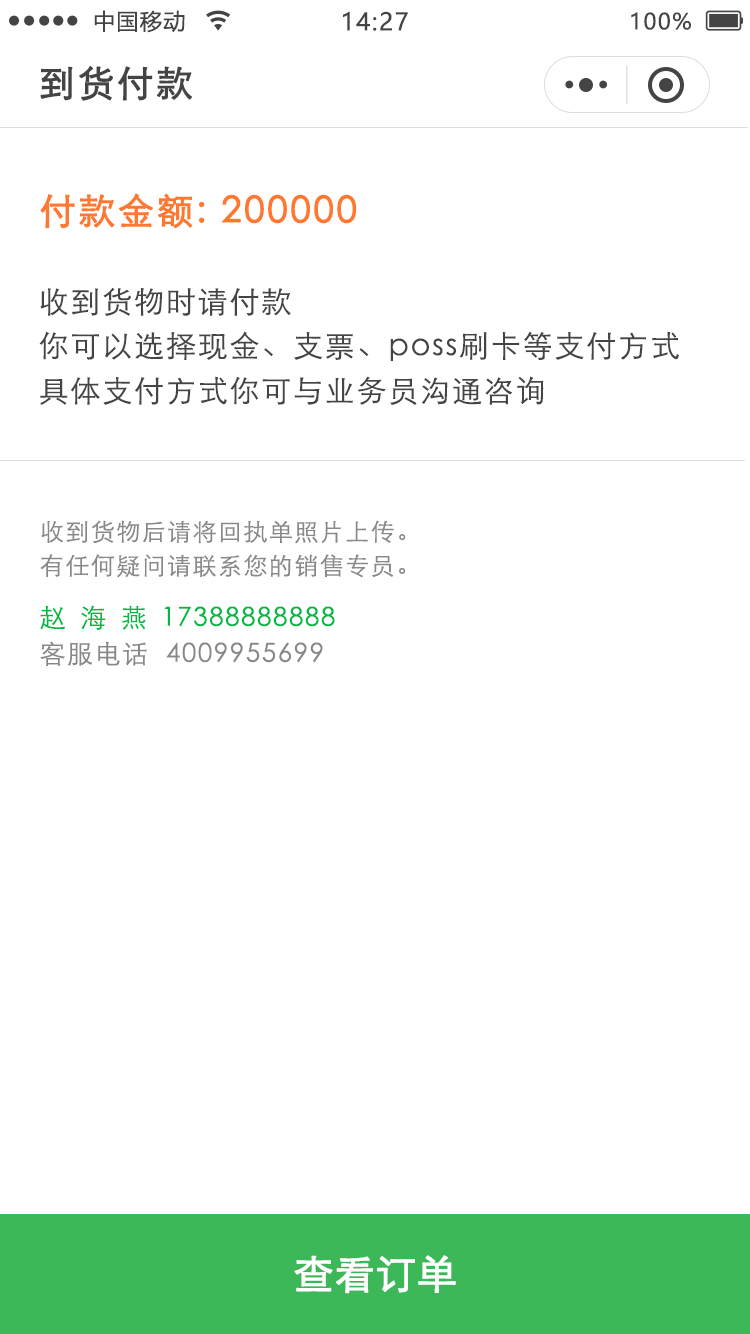
<style>
.page{position:relative;width:750px;height:1334px;background:#ffffff}
.page>*{position:absolute;margin:0}
.t1{font:22px "MicrosoftYaHei";letter-spacing:0.06em;color:#444444}
.t2{font:24px "MicrosoftYaHei";letter-spacing:0.06em;color:#444444}
.t3{font:36px "STXihei";letter-spacing:0.06em;color:#444444;font-weight:bold}
.t4{font:36px "STXihei";letter-spacing:0.06em;color:#ff782f;font-weight:bold}
.t5{font:30px "STXihei";letter-spacing:0.06em;color:#444444}
.t6{font:24px "STXihei";letter-spacing:0.06em;color:#888888}
.t7{font:26px "STXihei";letter-spacing:0.06em;color:#00b945}
.t8{font:26px "STXihei";letter-spacing:0.56em;color:#00b945}
.t9{font:26px "STXihei";letter-spacing:0.06em;color:#888888}
.t10{font:40px "STXihei";color:#ffffff;font-weight:bold}
</style>
<div class="page">
<p class="t1" style="left:94px;top:10px;width:91px;height:23px">中国移动</p>
<p class="t2" style="left:343px;top:11px;width:65px;height:20px">14:27</p>
<p class="t1" style="left:631px;top:12px;width:60px;height:18px">100%</p>
<p class="t3" style="left:40px;top:66px;width:152px;height:35px">到货付款</p>
<p class="t4" style="left:40px;top:193px;width:317px;height:36px">付款金额: 200000</p>
<p class="t5" style="left:40px;top:287px;width:251px;height:29px">收到货物时请付款</p>
<p class="t5" style="left:39px;top:331px;width:640px;height:30px">你可以选择现金、支票、poss刷卡等支付方式</p>
<p class="t5" style="left:40px;top:376px;width:504px;height:29px">具体支付方式你可与业务员沟通咨询</p>
<p class="t6" style="left:41px;top:520px;width:365px;height:24px">收到货物后请将回执单照片上传。</p>
<p class="t6" style="left:40px;top:554px;width:366px;height:24px">有任何疑问请联系您的销售专员。</p>
<p class="t7" style="left:40px;top:605px;width:295px;height:25px"><span class="t8">赵海燕</span>17388888888</p>
<p class="t9" style="left:40px;top:641px;width:283px;height:25px">客服电话  4009955699</p>
<p class="t10" style="left:294px;top:1255px;width:162px;height:39px">查看订单</p>
</div>
